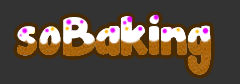
<style>
.page{position:relative;width:240px;height:84px;background:#333333}
.page>*{position:absolute;margin:0}
.t1{font:48px "JandaManateeSolid"}
</style>
<div class="page">
<p class="t1" style="left:17px;top:15px;width:194px;height:60px">soBaking</p>
</div>
